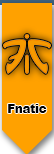
<style>
.page{position:relative;width:54px;height:154px;background:#ffa100}
.page>*{position:absolute;margin:0}
.t1{font:11.7px "Arial-Black";letter-spacing:-0.01em;color:#000000}
</style>
<div class="page">
<p class="t1" style="left:8px;top:104px;width:39px;height:9px">Fnatic</p>
</div>
